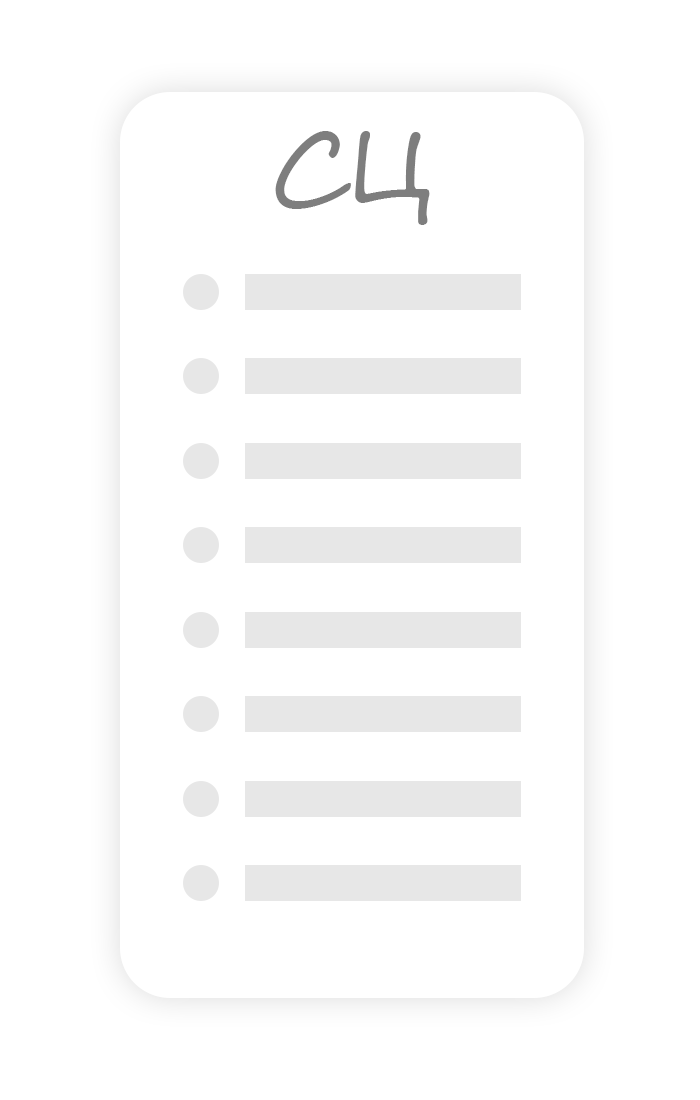
<style>
.page{position:relative;width:700px;height:1100px;background:#ffffff}
.page>*{position:absolute;margin:0}
.t1{font:99px "SegoeScript";color:#7e7e7e}
</style>
<div class="page">
<p class="t1" style="left:275px;top:131px;width:155px;height:94px">СЦ</p>
</div>
